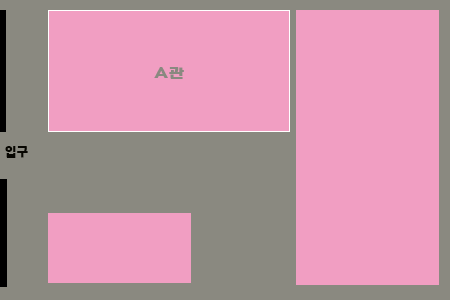
<style>
.page{position:relative;width:450px;height:300px;background:#f19ec2}
.page>*{position:absolute;margin:0}
.t1{font:12px "HeadlineR-HM";color:#8a8980;scale:1.33 1}
.t2{font:12px "HeadlineR-HM";color:#070601}
</style>
<div class="page">
<p class="t1" style="left:154px;top:67px;width:30px;height:12px">A관</p>
<p class="t2" style="left:5px;top:146px;width:23px;height:12px">입구</p>
</div>
